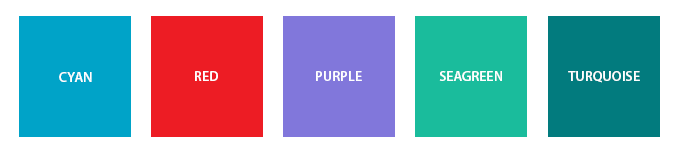
<style>
.page{position:relative;width:678px;height:158px;background:#ffffff}
.page>*{position:absolute;margin:0}
.t1{font:14px "MyriadPro-Semibold";color:#ffffff;text-transform:uppercase}
</style>
<div class="page">
<p class="t1" style="left:59px;top:72px;width:33px;height:10px">cyan</p>
<p class="t1" style="left:195px;top:71px;width:23px;height:10px">Red</p>
<p class="t1" style="left:316px;top:71px;width:46px;height:10px">Purple</p>
<p class="t1" style="left:439px;top:71px;width:63px;height:10px">SeaGreen</p>
<p class="t1" style="left:568px;top:71px;width:72px;height:12px">turquoise</p>
</div>
